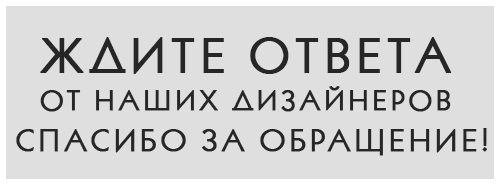
<style>
.page{position:relative;width:500px;height:189px;background:#dfdfdf}
.page>*{position:absolute;margin:0}
.t1{font:49.8px "Azbuka04";letter-spacing:0.1em;color:#262626;font-weight:bold}
.t2{font:29.3px "Azbuka04";letter-spacing:0.1em;color:#262626;font-weight:bold}
.t3{font:31.9px "Azbuka04";letter-spacing:0.1em;color:#262626;font-weight:bold}
</style>
<div class="page">
<p class="t1" style="left:40px;top:37px;width:412px;height:37px">ЖДИТЕ ОТВЕТА</p>
<p class="t2" style="left:40px;top:86px;width:411px;height:26px">ОТ НАШИХ ДИЗАЙНЕРОВ</p>
<p class="t3" style="left:16px;top:128px;width:471px;height:28px">СПАСИБО ЗА ОБРАЩЕНИЕ!</p>
</div>
